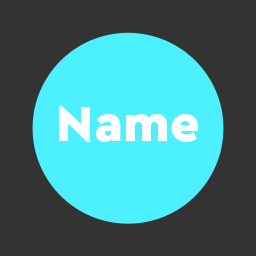
<style>
.page{position:relative;width:256px;height:256px;background:#333333}
.page>*{position:absolute;margin:0}
.t1{font:52.2px "CeraPro-Black";color:#ffffff}
</style>
<div class="page">
<p class="t1" style="left:59px;top:106px;width:139px;height:36px">Name</p>
</div>
